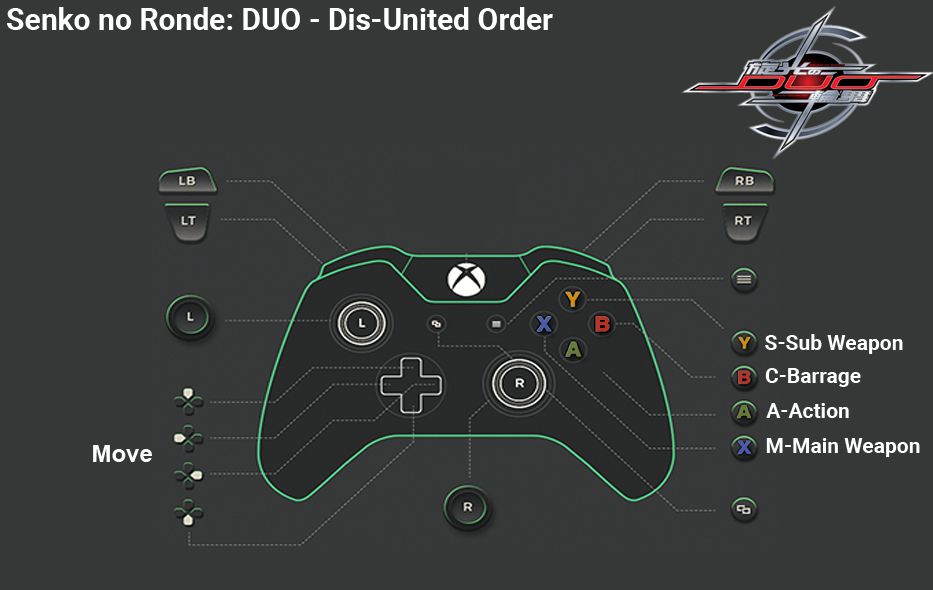
<style>
.page{position:relative;width:933px;height:590px;background:#363838}
.page>*{position:absolute;margin:0}
.t1{font:30px "Roboto-Bold";color:#ffffff}
.t2{font:21px "Roboto-Bold";color:#ffffff}
.t3{font:24px "Arial-BoldMT";color:#fefefe}
</style>
<div class="page">
<p class="t1" style="left:7px;top:7px;width:546px;height:23px">Senko no Ronde: DUO - Dis-United Order</p>
<p class="t2" style="left:765px;top:334px;width:138px;height:20px">S-Sub Weapon</p>
<p class="t2" style="left:765px;top:368px;width:96px;height:19px">C-Barrage</p>
<p class="t2" style="left:766px;top:403px;width:83px;height:15px">A-Action</p>
<p class="t2" style="left:766px;top:438px;width:154px;height:19px">M-Main Weapon</p>
<p class="t3" style="left:93px;top:445px;width:59px;height:17px">Move</p>
</div>
